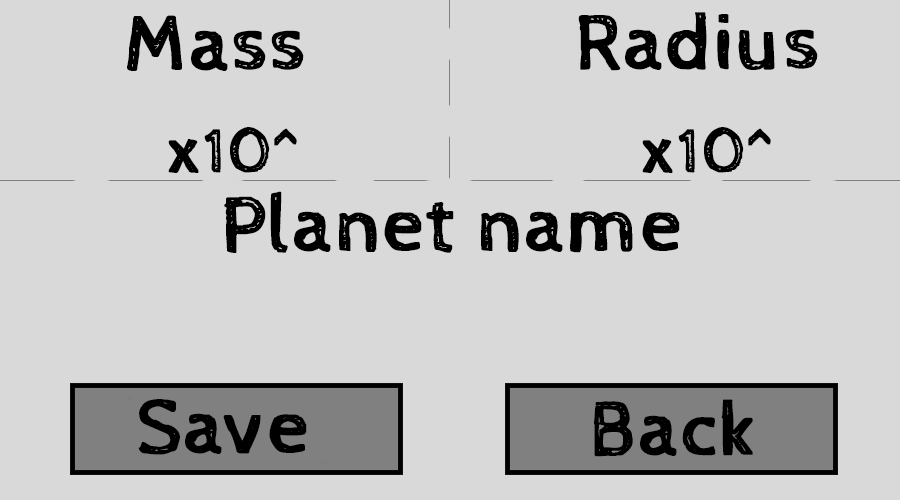
<style>
.page{position:relative;width:900px;height:500px;background:#d9d9d9}
.page>*{position:absolute;margin:0}
.t1{font:80px "CabinSketch-Regular";color:#000000;font-weight:bold}
.t2{font:64px "CabinSketch-Regular";color:#000000;font-weight:bold}
</style>
<div class="page">
<p class="t1" style="left:127px;top:15px;width:177px;height:56px">Mass</p>
<p class="t1" style="left:578px;top:12px;width:240px;height:59px">Radius</p>
<p class="t2" style="left:168px;top:127px;width:129px;height:46px">x10^</p>
<p class="t2" style="left:642px;top:127px;width:129px;height:46px">x10^</p>
<p class="t1" style="left:224px;top:191px;width:456px;height:62px">Planet name</p>
<p class="t1" style="left:138px;top:399px;width:169px;height:56px">Save</p>
<p class="t1" style="left:594px;top:399px;width:159px;height:58px">Back</p>
</div>
